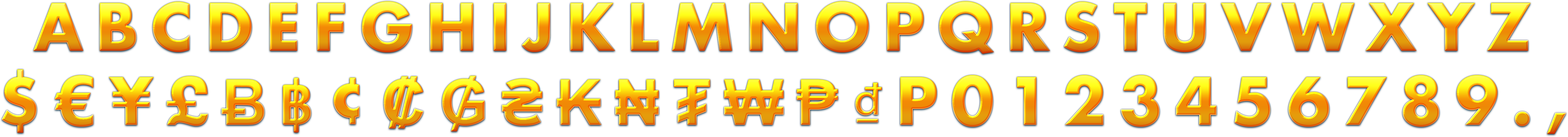
<style>
.page{position:relative;width:1568px;height:137px;background:#ffffff}
.page>*{position:absolute;margin:0}
.t1{font:63.6px "FuturaStd-Bold";letter-spacing:0.2em;text-transform:uppercase}
.t2{font:63.6px "Arial-BoldMT";letter-spacing:0.2em;text-transform:uppercase}
.t3{font:63.6px "Calibri-Bold";letter-spacing:0.2em;text-transform:uppercase}
.t4{font:63.6px "MyriadPro-Regular";letter-spacing:0.2em;text-transform:uppercase}
</style>
<div class="page">
<p class="t1" style="left:33px;top:1px;width:1498px;height:53px">ABCDEFGHIJKLMNOPQRSTUVWXYZ</p>
<p class="t1" style="left:2px;top:69px;width:1564px;height:65px">$€¥£<span class="t2">Ƀ</span><span class="t3">฿</span>¢<span class="t2">₡₲₴₭₦₮₩₱</span><span class="t4">₫</span>p0123456789.,</p>
</div>
